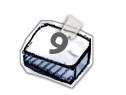
<style>
.page{position:relative;width:126px;height:95px;background:#ffffff}
.page>*{position:absolute;margin:0}
.t1{font:33.4px "Nobile-Bold";color:#606060}
</style>
<div class="page">
<p class="t1" style="left:49px;top:32px;width:19px;height:22px;rotate:23deg">9</p>
</div>
